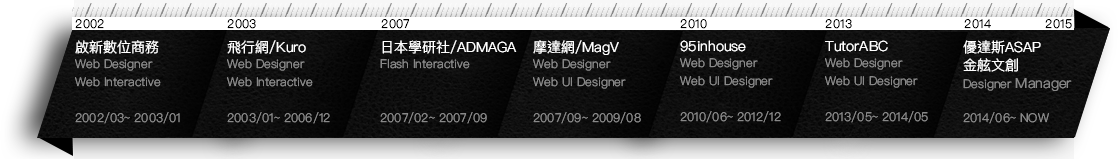
<style>
.page{position:relative;width:1118px;height:159px}
.page>*{position:absolute;margin:0}
.t1{font:12px "PingFangHK-Light";color:#000000}
.t2{font:12px/18px "PingFangHK-Light";color:#888888}
.t3{font:14px/18px "PingFangHK-Light";color:#ffffff}
.t4{font:14px/18px "PingFangHK-Light";color:#888888}
</style>
<div class="page">
<p class="t1" style="left:75px;top:19px;width:29px;height:10px">2002</p>
<p class="t1" style="left:227px;top:19px;width:29px;height:10px">2003</p>
<p class="t1" style="left:381px;top:19px;width:29px;height:10px">2007</p>
<p class="t1" style="left:680px;top:19px;width:27px;height:10px">2010</p>
<p class="t1" style="left:825px;top:19px;width:27px;height:10px">2013</p>
<p class="t1" style="left:964px;top:19px;width:27px;height:10px">2014</p>
<p class="t1" style="left:1045px;top:19px;width:27px;height:10px">2015</p>
<p class="t2" style="left:75px;top:40px;width:105px;height:84px"><span class="t3">啟新數位商務<br></span>Web Designer<br>Web Interactive<br><br>2002/03~ 2003/01</p>
<p class="t2" style="left:227px;top:40px;width:103px;height:84px"><span class="t3">飛行網/Kuro<br></span>Web Designer<br>Web Interactive<br><br>2003/01~ 2006/12</p>
<p class="t2" style="left:380px;top:40px;width:137px;height:84px"><span class="t3">日本學研社/ADMAGA<br></span>Flash Interactive<br><br><br>2007/02~ 2007/09</p>
<p class="t2" style="left:533px;top:40px;width:108px;height:84px"><span class="t3">摩達網/MagV<br></span>Web Designer<br>Web UI Designer<br><br>2007/09~ 2009/08</p>
<p class="t2" style="left:680px;top:40px;width:101px;height:83px"><span class="t3">95inhouse<br></span>Web Designer<br>Web UI Designer<br><br>2010/06~ 2012/12</p>
<p class="t2" style="left:825px;top:40px;width:103px;height:83px"><span class="t3">TutorABC<br></span>Web Designer<br>Web UI Designer<br><br>2013/05~ 2014/05</p>
<p class="t3" style="left:963px;top:40px;width:109px;height:84px">優達斯ASAP<br>金舷文創<br><span class="t2">Designer </span><span class="t4">Manager<br></span><span class="t2"><br>2014/06~ NOW</span></p>
</div>
